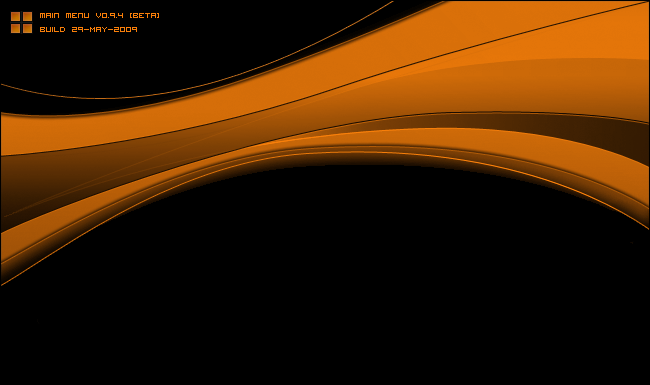
<style>
.page{position:relative;width:650px;height:385px;background:#000000}
.page>*{position:absolute;margin:0}
.t1{font:12px "VisitorTT2BRK";color:#f87f0a}
</style>
<div class="page">
<p class="t1" style="left:40px;top:13px;width:119px;height:19px">main menu v0.9.4 [beta]<br>build 29-May-2009</p>
</div>
